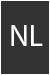
<style>
.page{position:relative;width:50px;height:75px;background:#333333}
.page>*{position:absolute;margin:0}
.t1{font:30px "MyriadPro-Regular";color:#ffffff}
</style>
<div class="page">
<p class="t1" style="left:11px;top:25px;width:32px;height:21px">NL</p>
</div>
